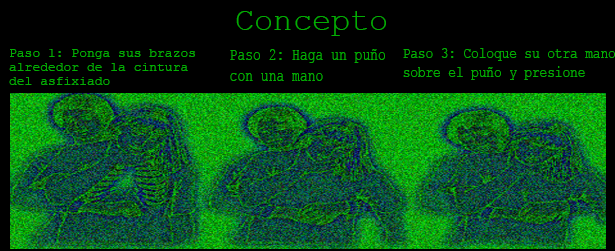
<style>
.page{position:relative;width:615px;height:251px;background:#000000}
.page>*{position:absolute;margin:0}
.t1{font:32px "CourierNewPSMT";color:#03ad03}
.t2{font:11.9px "CourierNewPSMT";color:#03ad03;scale:1.09 1}
.t3{font:16.8px "CourierNewPSMT";color:#03ad03;scale:0.77 1}
.t4{font:16.2px "CourierNewPSMT";color:#03ad03;scale:0.78 1}
</style>
<div class="page">
<p class="t1" style="left:236px;top:11px;width:150px;height:25px">Concepto</p>
<p class="t2" style="left:9px;top:49px;width:186px;height:36px">Paso 1: Ponga sus brazos <br>alrededor de la cintura<br>del asfixiado</p>
<p class="t3" style="left:230px;top:49px;width:155px;height:32px">Paso 2: Haga un puño <br>con una mano</p>
<p class="t4" style="left:403px;top:48px;width:212px;height:32px">Paso 3: Coloque su otra mano <br>sobre el puño y presione</p>
</div>
